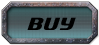
<style>
.page{position:relative;width:99px;height:45px}
.page>*{position:absolute;margin:0}
.t1{font:27.4px "Motorwerk";color:#000000}
</style>
<div class="page">
<p class="t1" style="left:27px;top:17px;width:49px;height:13px">Buy</p>
</div>
